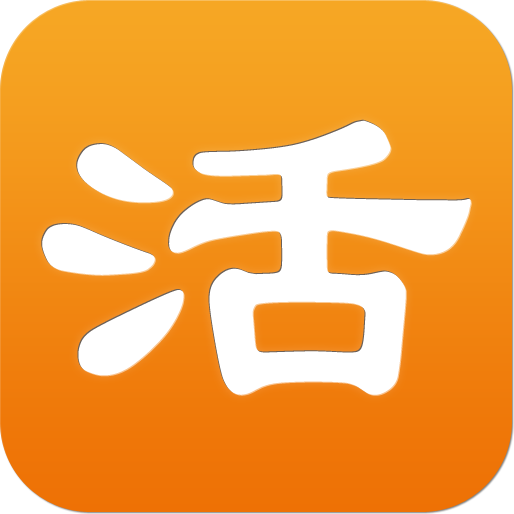
<style>
.page{position:relative;width:514px;height:514px;background:#ffffff}
.page>*{position:absolute;margin:0}
.t1{font:488.9px "HYf1gj";letter-spacing:0.025em;color:#ffffff;font-weight:bold;scale:0.95 1}
</style>
<div class="page">
<p class="t1" style="left:41px;top:119px;width:430px;height:276px">活</p>
</div>
